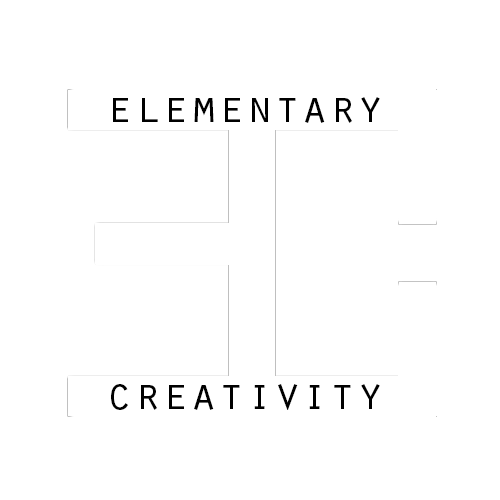
<style>
.page{position:relative;width:500px;height:500px;background:#ffffff}
.page>*{position:absolute;margin:0}
.t1{font:46.2px "OratorStd";color:#000000}
</style>
<div class="page">
<p class="t1" style="left:113px;top:97px;width:267px;height:26px">elementary</p>
<p class="t1" style="left:113px;top:97px;width:267px;height:26px">elementary</p>
<p class="t1" style="left:111px;top:384px;width:269px;height:26px">creativity</p>
<p class="t1" style="left:111px;top:384px;width:269px;height:26px">creativity</p>
</div>
